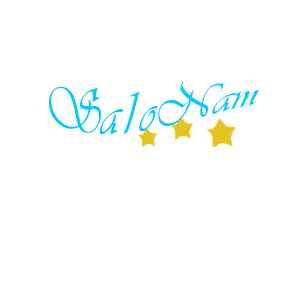
<style>
.page{position:relative;width:288px;height:288px;background:#ffffff}
.page>*{position:absolute;margin:0}
.t1{font:48px "Vivaldii";color:#00ccff}
</style>
<div class="page">
<p class="t1" style="left:49px;top:81px;width:210px;height:54px">Sa1oNam</p>
</div>
